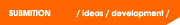
<style>
.page{position:relative;width:180px;height:25px;background:#ff6600}
.page>*{position:absolute;margin:0}
.t1{font:8px "Atlanta-Demi";color:#ffffff}
</style>
<div class="page">
<p class="t1" style="left:9px;top:9px;width:42px;height:8px">SUBMITION</p>
<p class="t1" style="left:76px;top:10px;width:94px;height:8px">/ ideas / development /</p>
</div>
